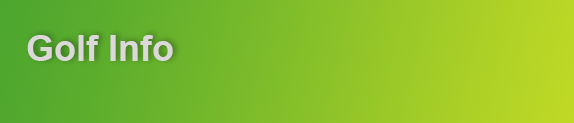
<style>
.page{position:relative;width:574px;height:123px}
.page>*{position:absolute;margin:0}
.t1{font:36px "Arial-BoldMT";color:#dad9d7}
</style>
<div class="page">
<p class="t1" style="left:27px;top:35px;width:146px;height:26px">Golf Info</p>
</div>
